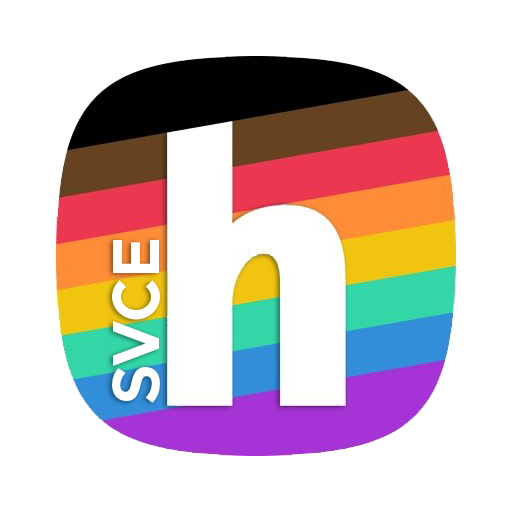
<style>
.page{position:relative;width:512px;height:512px;background:#ffffff}
.page>*{position:absolute;margin:0}
.t1{font:67.5px "Metropolis-Bold";letter-spacing:0.01em;color:#ffffff;scale:0.92 1}
</style>
<div class="page">
<p class="t1" style="left:112px;top:240px;width:48px;height:163px;rotate:-90deg">SVCE</p>
</div>
